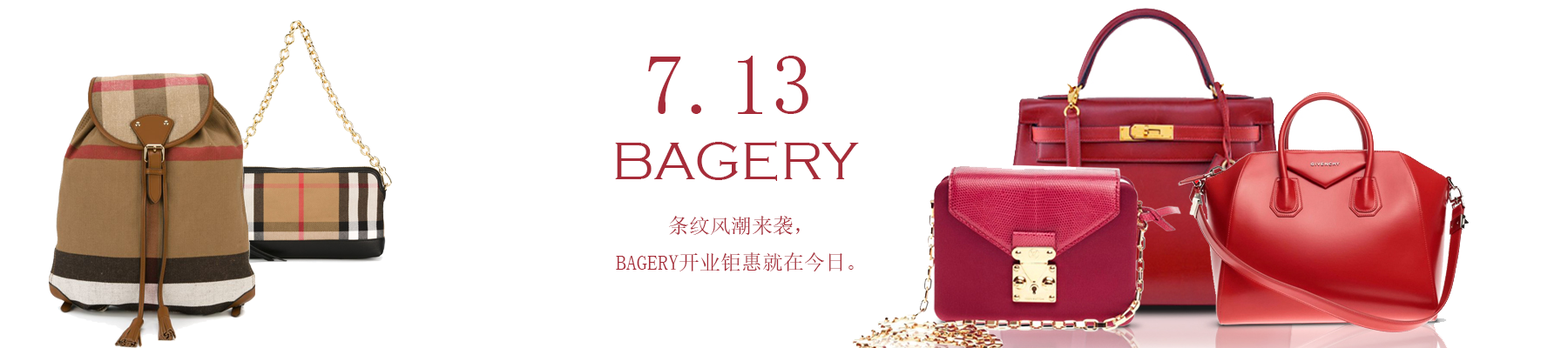
<style>
.page{position:relative;width:1568px;height:348px;background:#ffffff}
.page>*{position:absolute;margin:0}
.t1{font:85.4px "SimSun";color:#a72c39}
.t2{font:54.9px "CopperplateGothic-Light";color:#a72c39}
.t3{font:20.9px "SimSun";color:#a72c39}
</style>
<div class="page">
<p class="t1" style="left:648px;top:56px;width:160px;height:58px">7.13</p>
<p class="t2" style="left:615px;top:141px;width:244px;height:40px">BAGERY</p>
<p class="t3" style="left:616px;top:216px;width:238px;height:56px;text-align:center">条纹风潮来袭，<br>BAGERY开业钜惠就在今日。</p>
</div>
